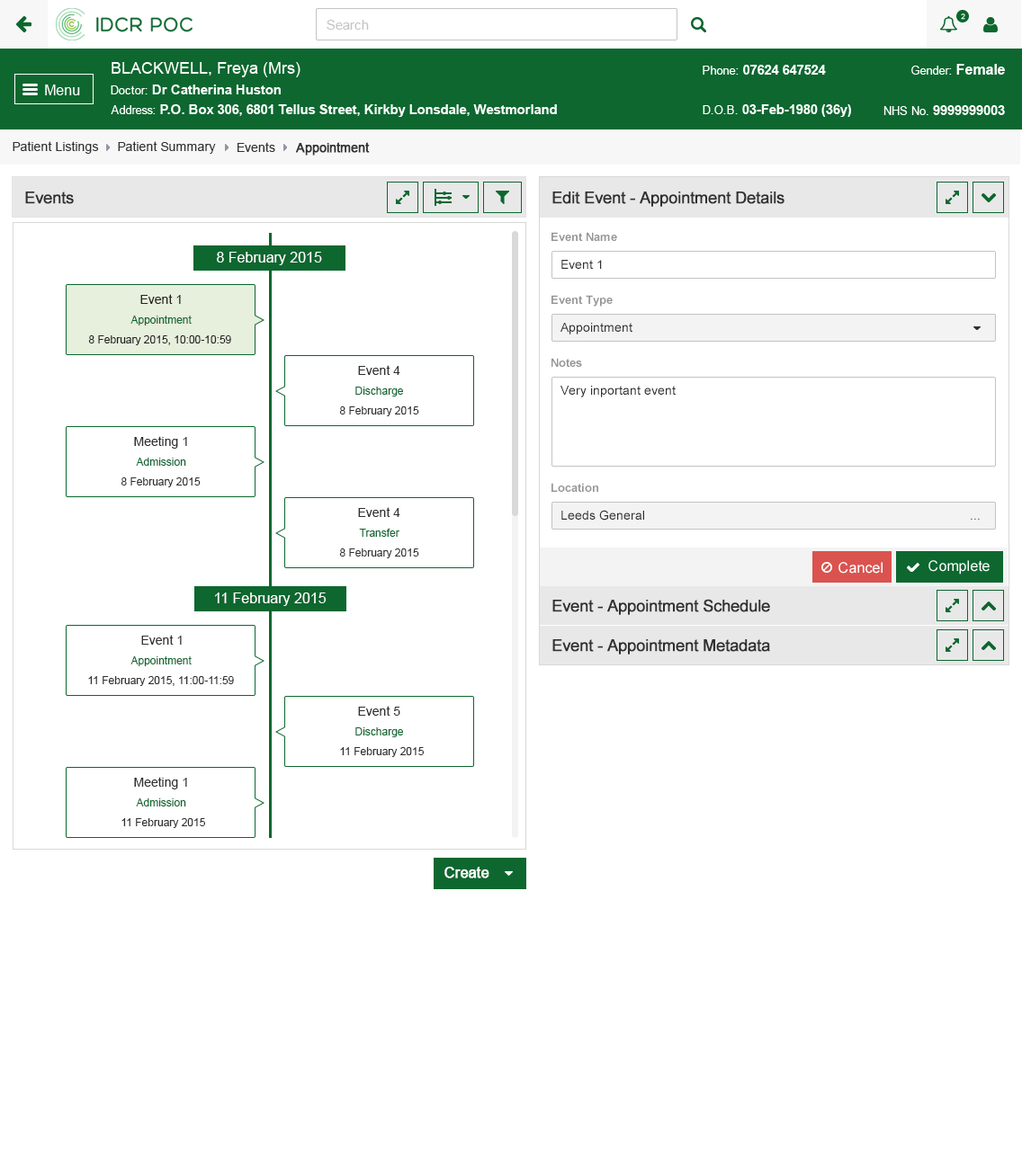
<style>
.page{position:relative;width:1022px;height:1167px;background:#ffffff}
.page>*{position:absolute;margin:0}
.t1{font:12.6px "ArialMT";color:#313131}
.t2{font:12.6px "ArialMT";color:#313131;font-weight:bold}
.t3{font:16.2px "ArialMT";color:#303030;font-weight:bold}
.t4{font:11.7px "Arial-BoldMT";color:#959595}
.t5{font:14.4px "ArialMT";color:#ffffff}
.t6{font:12.6px "ArialMT";color:#303030}
.t7{font:12.6px "ArialMT";color:#242424}
.t8{font:10.8px "ArialMT";color:#0d672f}
.t9{font:10.8px "ArialMT";color:#242424}
.t10{font:10.8px "ArialMT";color:#303030}
.t11{font:12.6px "ArialMT"}
.t12{font:14.4px "ArialMT";color:#ffffff;font-weight:bold}
</style>
<div class="page">
<p class="t1" style="left:13px;top:141px;width:86px;height:13px">Patient Listings</p>
<p class="t1" style="left:118px;top:141px;width:98px;height:13px">Patient Summary</p>
<p class="t1" style="left:237px;top:142px;width:38px;height:10px">Events</p>
<p class="t2" style="left:296px;top:142px;width:74px;height:14px">Appointment</p>
<p class="t3" style="left:25px;top:192px;width:49px;height:12px">Events</p>
<p class="t3" style="left:552px;top:192px;width:232px;height:15px">Edit Event - Appointment Details</p>
<p class="t4" style="left:551px;top:232px;width:66px;height:9px">Event Name</p>
<p class="t5" style="left:217px;top:252px;width:105px;height:13px">8 February 2015</p>
<p class="t6" style="left:561px;top:260px;width:41px;height:9px">Event 1</p>
<p class="t7" style="left:140px;top:294px;width:41px;height:10px">Event 1</p>
<p class="t4" style="left:551px;top:295px;width:61px;height:12px">Event Type</p>
<p class="t8" style="left:130px;top:316px;width:62px;height:10px">Appointment</p>
<p class="t6" style="left:560px;top:323px;width:72px;height:12px">Appointment</p>
<p class="t9" style="left:88px;top:335px;width:143px;height:10px">8 February 2015, 10:00-10:59</p>
<p class="t6" style="left:358px;top:365px;width:42px;height:10px">Event 4</p>
<p class="t4" style="left:551px;top:358px;width:31px;height:9px">Notes</p>
<p class="t8" style="left:355px;top:387px;width:48px;height:10px">Discharge</p>
<p class="t6" style="left:560px;top:386px;width:115px;height:11px">Very inportant event</p>
<p class="t10" style="left:339px;top:406px;width:80px;height:10px">8 February 2015</p>
<p class="t6" style="left:134px;top:436px;width:53px;height:13px">Meeting 1</p>
<p class="t8" style="left:136px;top:458px;width:50px;height:8px">Admission</p>
<p class="t10" style="left:121px;top:478px;width:80px;height:9px">8 February 2015</p>
<p class="t4" style="left:551px;top:483px;width:47px;height:9px">Location</p>
<p class="t6" style="left:358px;top:507px;width:42px;height:10px">Event 4</p>
<p class="t6" style="left:561px;top:510px;width:83px;height:11px">Leeds General</p>
<p class="t11" style="left:970px;top:518px;width:9px;height:2px">...</p>
<p class="t8" style="left:359px;top:529px;width:40px;height:8px">Transfer</p>
<p class="t10" style="left:339px;top:549px;width:80px;height:9px">8 February 2015</p>
<p class="t5" style="left:215px;top:593px;width:111px;height:13px">11 February 2015</p>
<p class="t3" style="left:552px;top:599px;width:218px;height:16px">Event - Appointment Schedule</p>
<p class="t6" style="left:141px;top:635px;width:41px;height:10px">Event 1</p>
<p class="t3" style="left:552px;top:639px;width:218px;height:16px">Event - Appointment Metadata</p>
<p class="t8" style="left:130px;top:656px;width:62px;height:10px">Appointment</p>
<p class="t10" style="left:88px;top:676px;width:146px;height:10px">11 February 2015, 11:00-11:59</p>
<p class="t6" style="left:358px;top:706px;width:42px;height:10px">Event 5</p>
<p class="t8" style="left:355px;top:728px;width:48px;height:9px">Discharge</p>
<p class="t10" style="left:340px;top:747px;width:84px;height:10px">11 February 2015</p>
<p class="t6" style="left:134px;top:777px;width:53px;height:13px">Meeting 1</p>
<p class="t8" style="left:136px;top:799px;width:50px;height:8px">Admission</p>
<p class="t10" style="left:121px;top:818px;width:84px;height:10px">11 February 2015</p>
<p class="t12" style="left:444px;top:867px;width:45px;height:12px">Create</p>
</div>
